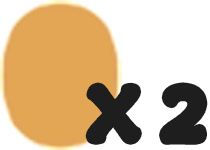
<style>
.page{position:relative;width:210px;height:150px;background:#ffffff}
.page>*{position:absolute;margin:0}
.t1{font:70px "MaiandraGD-Regular";letter-spacing:0.28em;color:#1e1e1e;font-weight:bold;scale:1.11 1}
</style>
<div class="page">
<p class="t1" style="left:91px;top:88px;width:111px;height:51px">X2</p>
</div>
